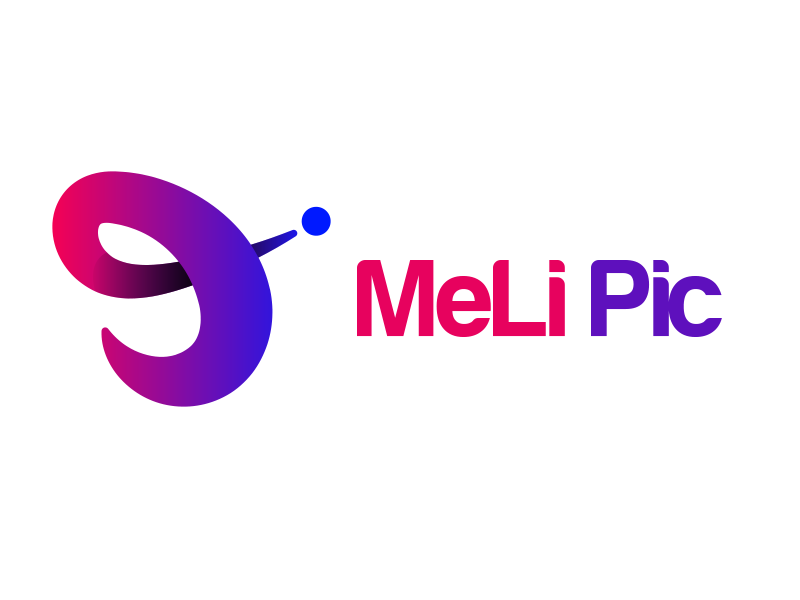
<style>
.page{position:relative;width:800px;height:600px;background:#ffffff}
.page>*{position:absolute;margin:0}
.t1{font:113.3px "Harabara";color:#e7025e}
.t2{font:113.3px "Harabara";color:#5e10bd}
</style>
<div class="page">
<p class="t1" style="left:357px;top:260px;width:365px;height:77px">MeLi <span class="t2">Pic</span></p>
</div>
